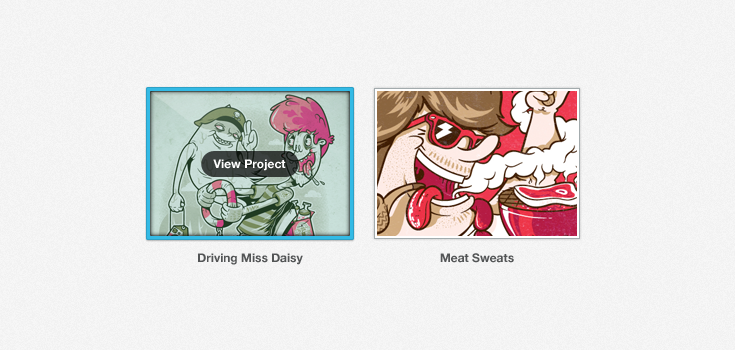
<style>
.page{position:relative;width:735px;height:350px}
.page>*{position:absolute;margin:0}
.t1{font:12px "HelveticaNeue-Bold";color:#ffffff}
.t2{font:12px "HelveticaNeue-Bold";color:#535556}
</style>
<div class="page">
<p class="t1" style="left:213px;top:159px;width:73px;height:12px">View Project</p>
<p class="t2" style="left:198px;top:253px;width:105px;height:12px">Driving Miss Daisy</p>
<p class="t2" style="left:440px;top:253px;width:74px;height:10px">Meat Sweats</p>
</div>
